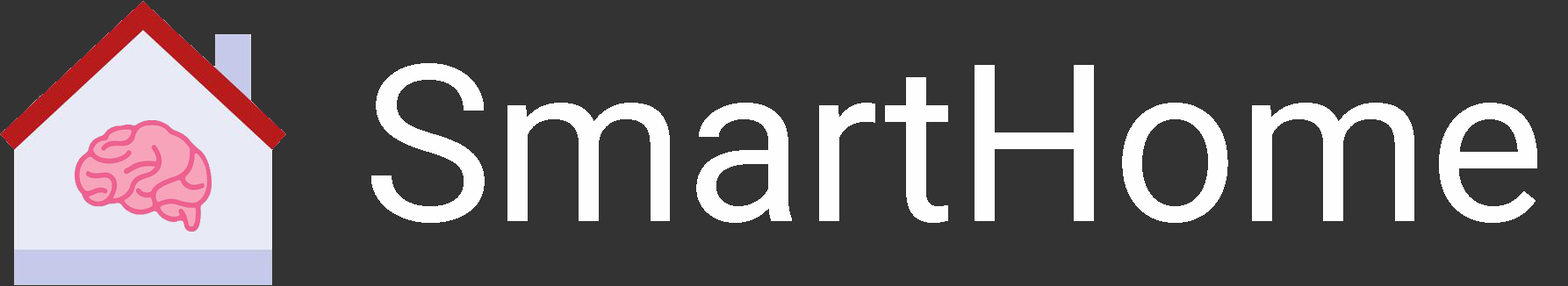
<style>
.page{position:relative;width:1568px;height:286px;background:#333333}
.page>*{position:absolute;margin:0}
.t1{font:219.5px "Roboto-Regular";color:#fefefe}
</style>
<div class="page">
<p class="t1" style="left:371px;top:63px;width:1166px;height:160px">SmartHome</p>
</div>
